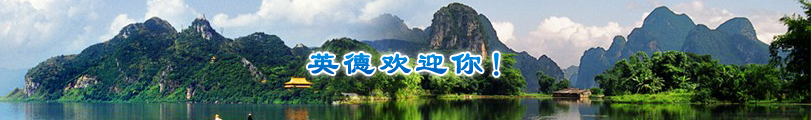
<style>
.page{position:relative;width:811px;height:120px}
.page>*{position:absolute;margin:0}
.t1{font:32px "LiSu";letter-spacing:0.1em;color:#0076cc;font-weight:bold}
</style>
<div class="page">
<p class="t1" style="left:308px;top:52px;width:191px;height:24px">英德欢迎你！</p>
</div>
